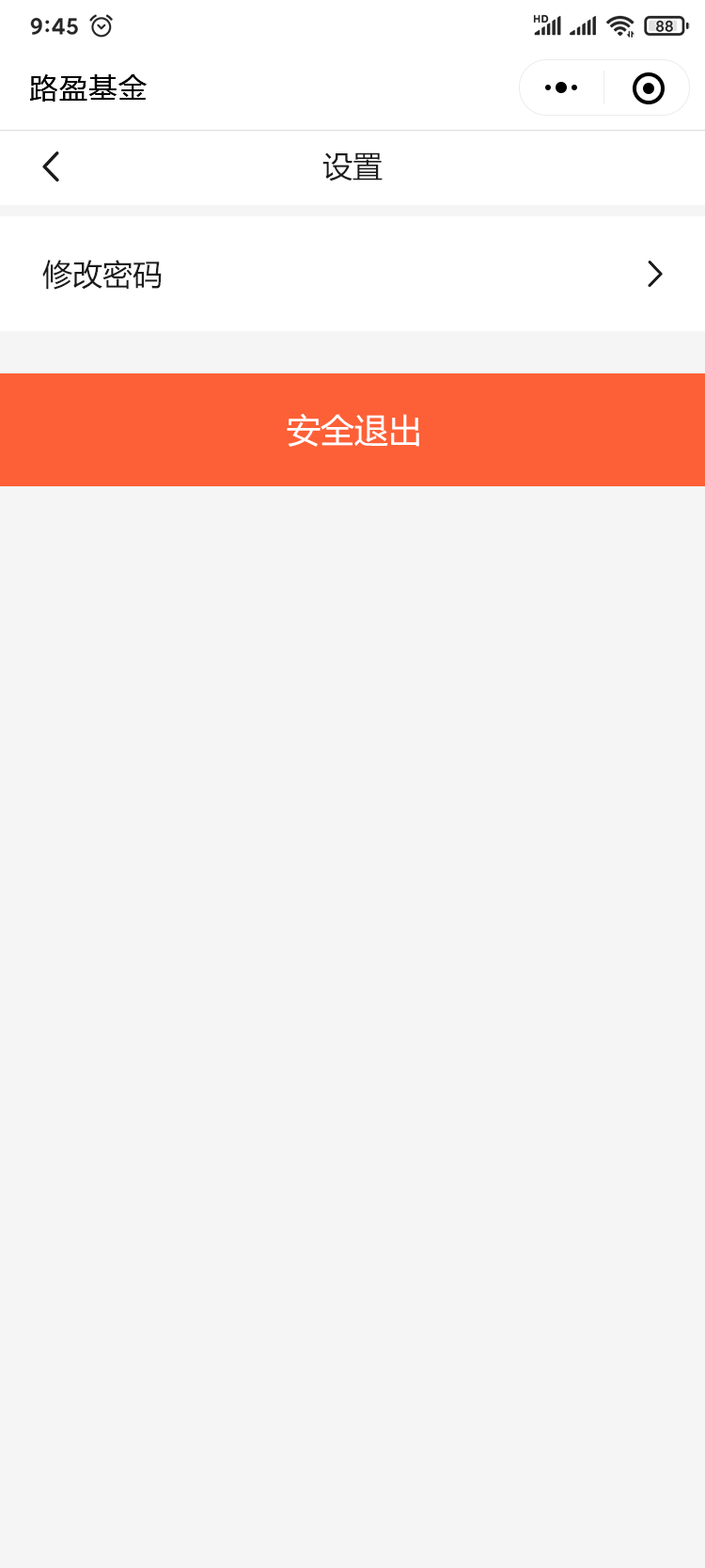
<style>
.page{position:relative;width:705px;height:1568px;background:#f5f5f5}
.page>*{position:absolute;margin:0}
.t1{font:28.2px "MicrosoftYaHei";letter-spacing:0.05em;color:#000000}
.t2{font:30.1px "MicrosoftYaHei";color:#1b1b1b}
.t3{font:33.9px "MicrosoftYaHei";color:#ffffff}
</style>
<div class="page">
<p class="t1" style="left:29px;top:74px;width:118px;height:28px">路盈基金</p>
<p class="t2" style="left:323px;top:152px;width:60px;height:30px">设置</p>
<p class="t2" style="left:42px;top:260px;width:120px;height:30px">修改密码</p>
<p class="t3" style="left:287px;top:413px;width:133px;height:34px">安全退出</p>
</div>
